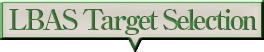
<style>
.page{position:relative;width:264px;height:52px;background:#ffffff}
.page>*{position:absolute;margin:0}
.t1{font:28px "RyuminPro-ExBold";letter-spacing:-0.1em;color:#3f723a}
</style>
<div class="page">
<p class="t1" style="left:9px;top:9px;width:248px;height:26px">LBAS Target Selection</p>
</div>
